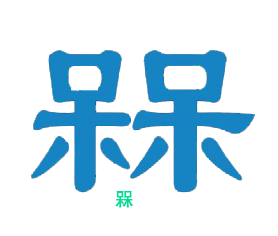
<style>
.page{position:relative;width:278px;height:236px;background:#ffffff}
.page>*{position:absolute;margin:0}
.t1{font:18px "STHeitiSC-Light";color:#00dd97;font-weight:bold}
</style>
<div class="page">
<p class="t1" style="left:115px;top:191px;width:18px;height:17px">槑</p>
</div>
